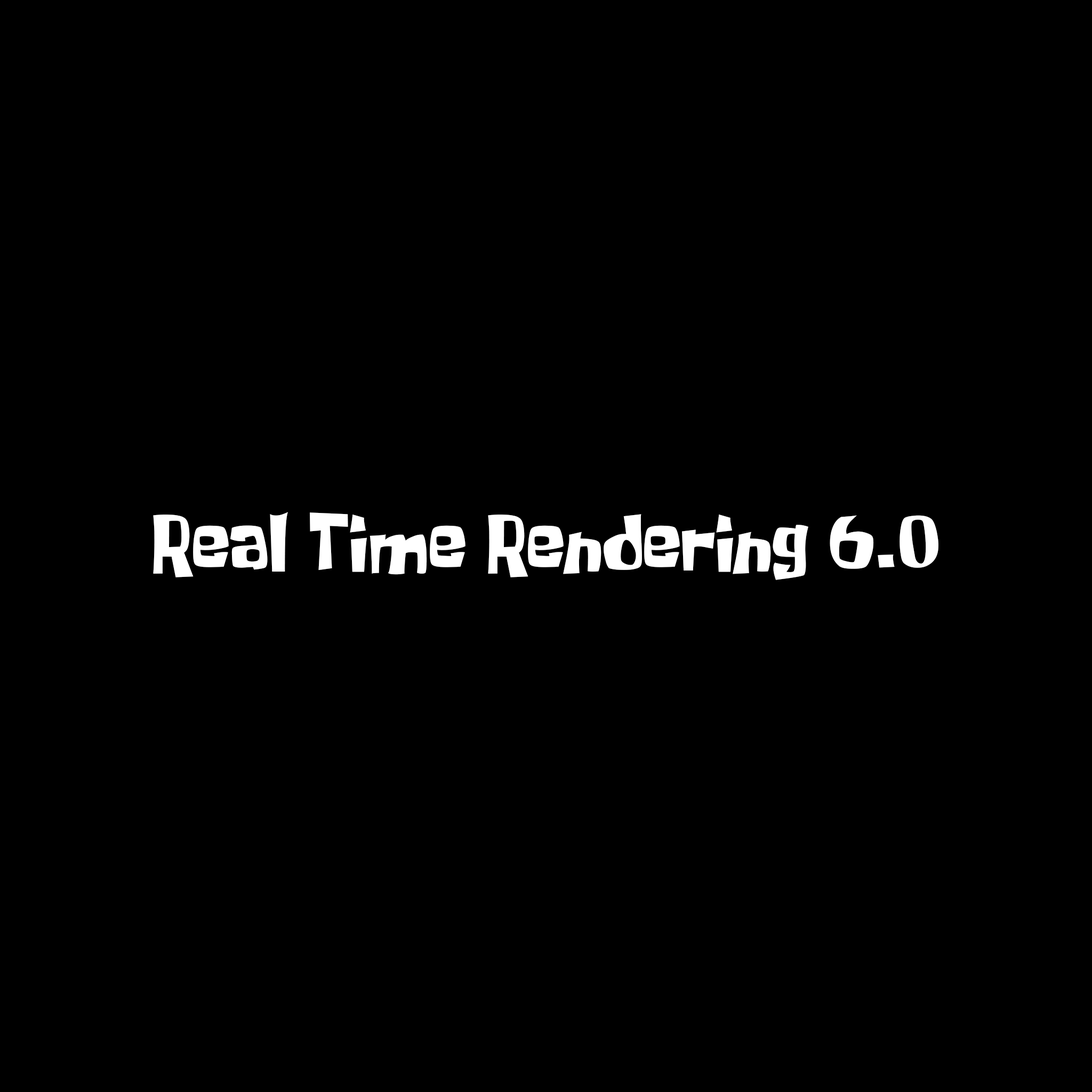
<style>
.page{position:relative;width:1092px;height:1092px;background:#000000}
.page>*{position:absolute;margin:0}
.t1{font:65.6px "SpongeboyMeBob";color:#ffffff}
</style>
<div class="page">
<p class="t1" style="left:153px;top:512px;width:785px;height:68px">Real Time Rendering 6.0</p>
</div>
